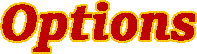
<style>
.page{position:relative;width:197px;height:54px;background:#ffffff}
.page>*{position:absolute;margin:0}
.t1{font:52.9px "SitkaText-BoldItalic";color:#c00007;font-weight:bold;scale:0.93 1}
</style>
<div class="page">
<p class="t1" style="left:2px;top:2px;width:193px;height:50px">Options</p>
</div>
